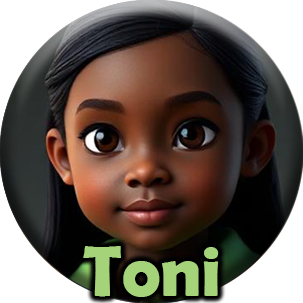
<style>
.page{position:relative;width:303px;height:303px}
.page>*{position:absolute;margin:0}
.t1{font:72.5px "BerlinSansFBDemi-Bold";color:#a5d37a}
</style>
<div class="page">
<p class="t1" style="left:83px;top:246px;width:136px;height:51px">Toni</p>
</div>
